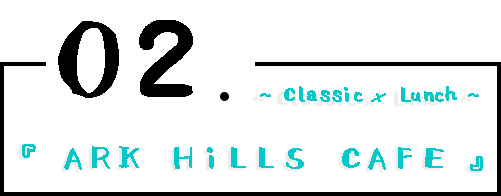
<style>
.page{position:relative;width:501px;height:196px;background:#ffffff}
.page>*{position:absolute;margin:0}
.t1{font:140px "001Shirokuma-Regular";letter-spacing:-0.36em;color:#000000}
.t2{font:106px "ElmerPFont";color:#000000}
.t3{font:24px "001Shirokuma-Regular";letter-spacing:-0.56em;color:#05c8c8;font-weight:bold}
.t4{font:24px "SnellRoundhand";letter-spacing:-0.56em;color:#05c8c8;font-weight:bold}
.t5{font:36px "001Shirokuma-Regular";letter-spacing:-0.26em;color:#05c8c8;font-weight:bold}
</style>
<div class="page">
<p class="t1" style="left:58px;top:21px;width:61px;height:77px">0</p>
<p class="t2" style="left:139px;top:20px;width:54px;height:77px">２</p>
<p class="t3" style="left:260px;top:86px;width:219px;height:16px">~ Classic <span class="t4">×</span>  Lunch ~</p>
<p class="t5" style="left:22px;top:144px;width:461px;height:27px">『　ARK HiLLS CAFE　』</p>
</div>
